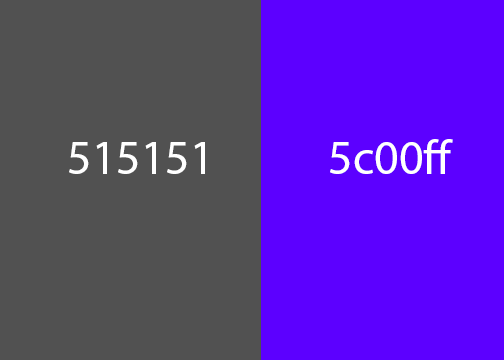
<style>
.page{position:relative;width:504px;height:360px;background:#515151}
.page>*{position:absolute;margin:0}
.t1{font:48px "MyriadPro-Regular";color:#ffffff}
</style>
<div class="page">
<p class="t1" style="left:69px;top:142px;width:136px;height:32px">515151</p>
<p class="t1" style="left:330px;top:139px;width:123px;height:35px">5c00ff</p>
</div>
